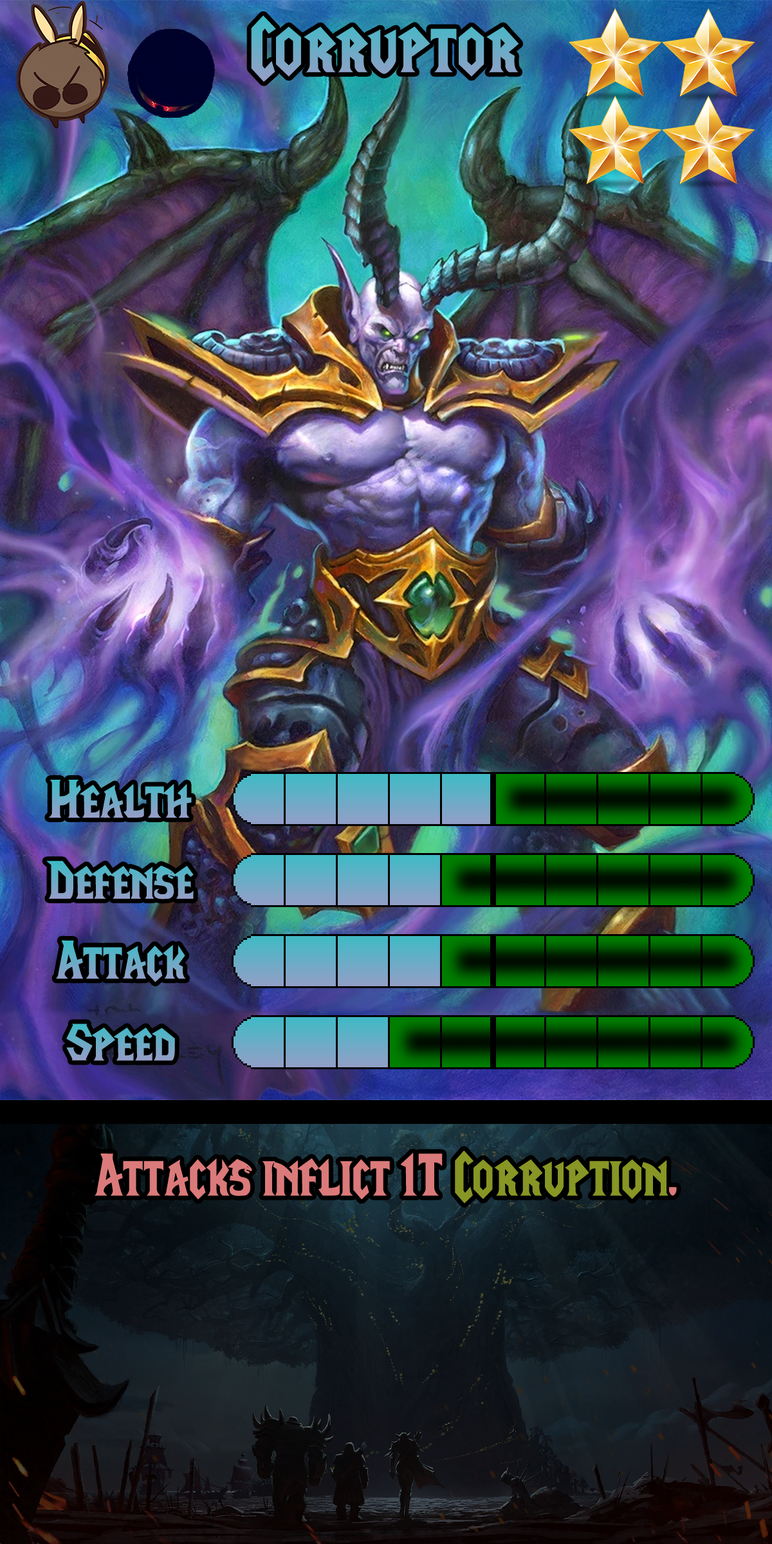
<style>
.page{position:relative;width:772px;height:1544px}
.page>*{position:absolute;margin:0}
.t1{font:128.7px "LifeCraft"}
.t2{font:92.7px "LifeCraft"}
.t3{font:102.5px "LifeCraft";color:#db7a7a;scale:0.94 1}
.t4{font:102.5px "LifeCraft";color:#879624;scale:0.94 1}
</style>
<div class="page">
<p class="t1" style="left:251px;top:15px;width:268px;height:67px">Corruptor</p>
<p class="t2" style="left:49px;top:780px;width:143px;height:38px">Health</p>
<p class="t2" style="left:46px;top:861px;width:148px;height:39px">Defense</p>
<p class="t2" style="left:56px;top:940px;width:130px;height:43px">Attack</p>
<p class="t2" style="left:66px;top:1024px;width:109px;height:37px">Speed</p>
<p class="t3" style="left:95px;top:1151px;width:582px;height:53px">Attacks inflict 1T <span class="t4">Corruption</span>.</p>
</div>
